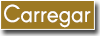
<style>
.page{position:relative;width:100px;height:36px;background:#9d7922}
.page>*{position:absolute;margin:0}
.t1{font:24px "Arcon-Regular";color:#ffffff;scale:0.92 1}
</style>
<div class="page">
<p class="t1" style="left:4px;top:4px;width:87px;height:24px">Carregar</p>
</div>
